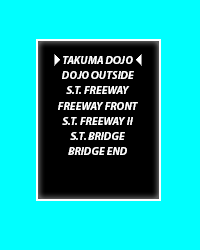
<style>
.page{position:relative;width:200px;height:250px;background:#00ffff}
.page>*{position:absolute;margin:0}
.t1{font:11px "MyriadPro-BoldIt";color:#ffffff}
</style>
<div class="page">
<p class="t1" style="left:58px;top:56px;width:80px;height:99px;text-align:center">TAKUMA DOJO<br>DOJO OUTSIDE<br>S.T. FREEWAY<br>FREEWAY FRONT<br>S.T. FREEWAY II<br>S.T. BRIDGE<br>BRIDGE END</p>
</div>
